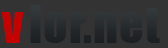
<style>
.page{position:relative;width:168px;height:48px;background:#333333}
.page>*{position:absolute;margin:0}
.t1{font:48px "Impact";letter-spacing:0.02em;color:#262b2e}
.t2{font:48px "Impact";letter-spacing:0.02em;color:#c60101}
</style>
<div class="page">
<p class="t1" style="left:30px;top:5px;width:130px;height:38px">lor.net</p>
<p class="t2" style="left:1px;top:12px;width:23px;height:31px">v</p>
</div>
